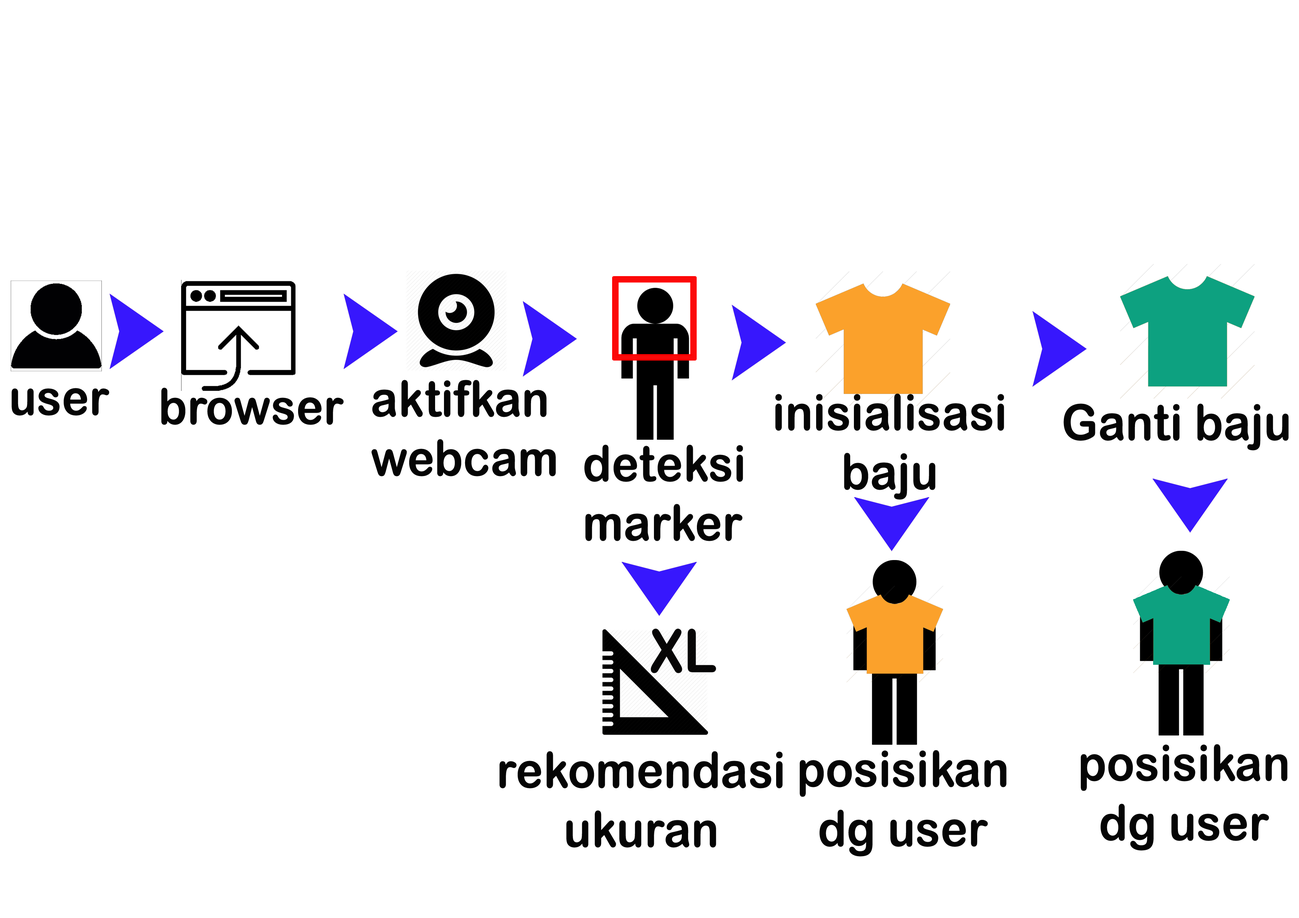
<style>
.page{position:relative;width:1299px;height:918px;background:#ffffff}
.page>*{position:absolute;margin:0}
.t1{font:49.4px "ArialRoundedMTBold";letter-spacing:-0.017em;color:#050505;font-weight:bold;scale:0.92 1}
</style>
<div class="page">
<p class="t1" style="left:11px;top:388px;width:98px;height:28px">user</p>
<p class="t1" style="left:161px;top:388px;width:183px;height:37px">browser</p>
<p class="t1" style="left:371px;top:380px;width:185px;height:96px">aktifkan<br>webcam</p>
<p class="t1" style="left:775px;top:394px;width:229px;height:106px;text-align:center">inisialisasi<br>baju</p>
<p class="t1" style="left:1063px;top:404px;width:225px;height:47px">Ganti baju</p>
<p class="t1" style="left:584px;top:445px;width:159px;height:96px">deteksi<br>marker</p>
<p class="t1" style="left:1080px;top:744px;width:207px;height:107px;text-align:center">posisikan<br>dg user</p>
<p class="t1" style="left:499px;top:751px;width:284px;height:97px;text-align:center">rekomendasi<br>ukuran</p>
<p class="t1" style="left:799px;top:750px;width:207px;height:107px;text-align:center">posisikan<br>dg user</p>
</div>
